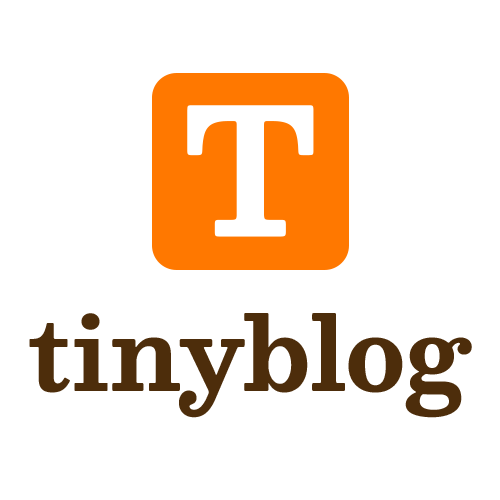
<style>
.page{position:relative;width:500px;height:500px;background:#ffffff}
.page>*{position:absolute;margin:0}
.t1{font:100px "BesleyRoman-Bold";color:#4d2d0b}
</style>
<div class="page">
<p class="t1" style="left:29px;top:313px;width:443px;height:105px">tinyblog</p>
</div>
